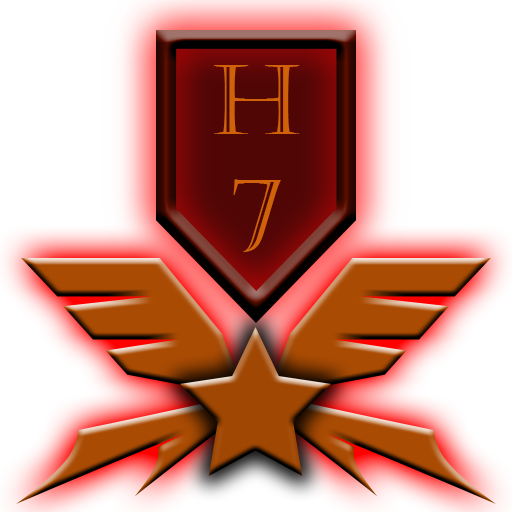
<style>
.page{position:relative;width:512px;height:512px;background:#ffffff}
.page>*{position:absolute;margin:0}
.t1{font:95.8px "Castellar";color:#d06209}
</style>
<div class="page">
<p class="t1" style="left:214px;top:65px;width:86px;height:187px;text-align:center">H<br>7</p>
</div>
